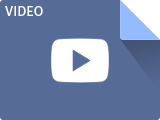
<style>
.page{position:relative;width:160px;height:120px;background:#566c97}
.page>*{position:absolute;margin:0}
.t1{font:14px "FiraSans-Regular";color:#ffffff}
</style>
<div class="page">
<p class="t1" style="left:5px;top:6px;width:38px;height:10px">VIDEO</p>
</div>
